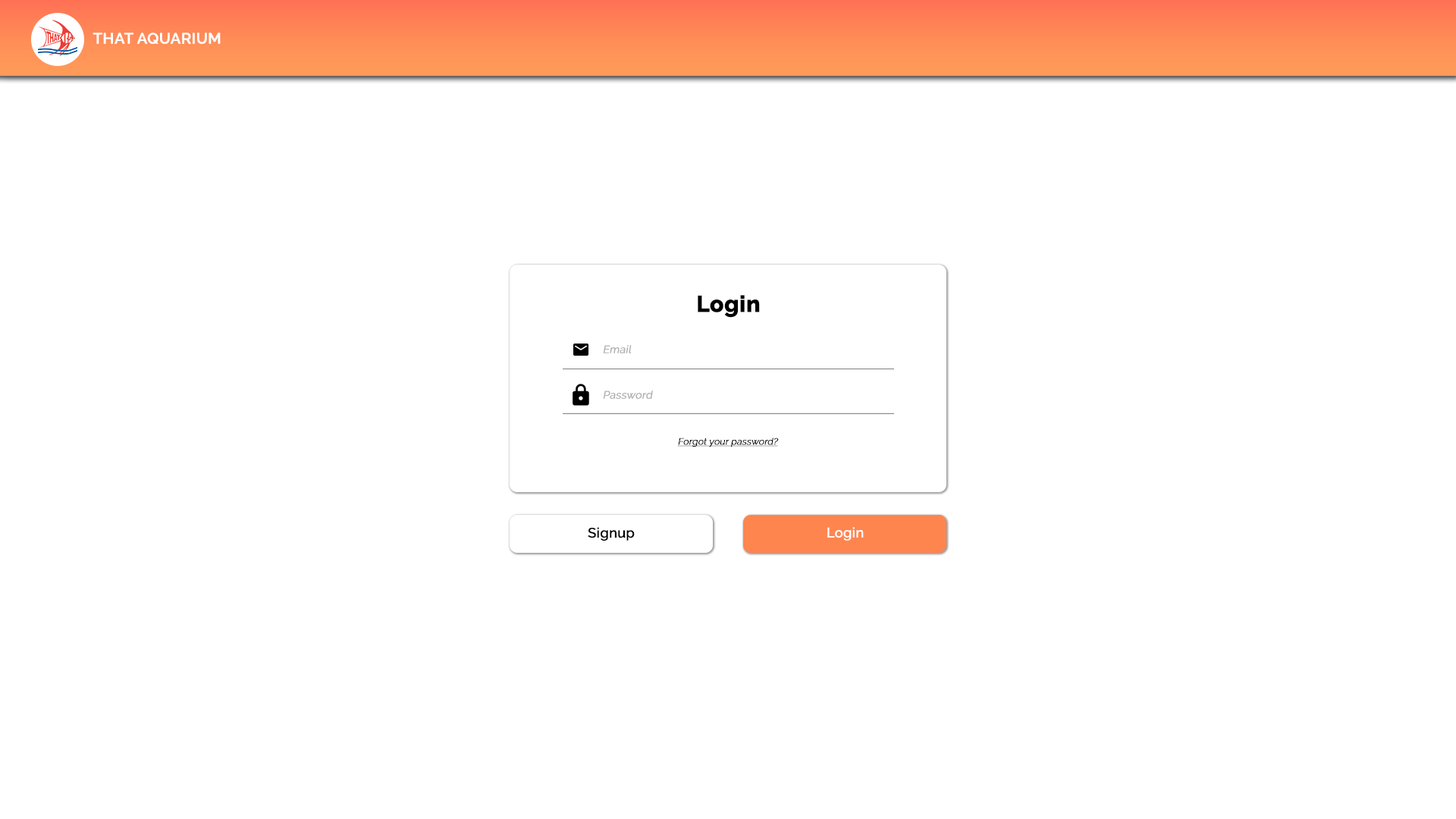
<style>
.page{position:relative;width:1456px;height:819px;background:#ffffff}
.page>*{position:absolute;margin:0}
.t1{font:15.2px "Raleway-SemiBold";color:#ffffff;font-weight:bold}
.t2{font:22.7px "Raleway-ExtraBold";color:#000000;font-weight:bold}
.t3{font:10.6px "Raleway-Regular";color:#afafaf;font-weight:bold;font-style:italic}
.t4{font:9.1px "Raleway-Light";color:#000000;font-weight:bold;font-style:italic;text-decoration:underline}
.t5{font:13.6px "Raleway-Medium";color:#000000;font-weight:bold}
.t6{font:13.6px "Raleway-Medium";color:#ffffff;font-weight:bold}
</style>
<div class="page">
<p class="t1" style="left:93px;top:33px;width:128px;height:11px">THAT AQUARIUM</p>
<p class="t2" style="left:698px;top:295px;width:62px;height:23px">Login</p>
<p class="t3" style="left:603px;top:345px;width:29px;height:8px">Email</p>
<p class="t3" style="left:603px;top:391px;width:50px;height:8px">Password</p>
<p class="t4" style="left:677px;top:438px;width:102px;height:9px">Forgot your password?</p>
<p class="t5" style="left:588px;top:527px;width:47px;height:14px">Signup</p>
<p class="t6" style="left:827px;top:527px;width:37px;height:14px">Login</p>
</div>
